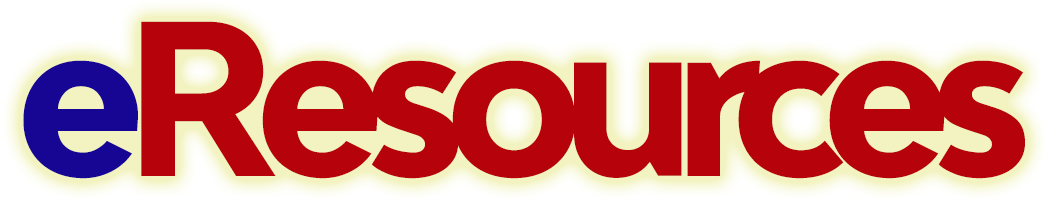
<style>
.page{position:relative;width:1056px;height:204px;background:#b6030b}
.page>*{position:absolute;margin:0}
.t1{font:208.3px "Adlinnaka-BoldDemo";letter-spacing:-0.1em;color:#b6030b}
.t2{font:208.3px "Adlinnaka-BoldDemo";letter-spacing:-0.1em;color:#170694}
</style>
<div class="page">
<p class="t1" style="left:23px;top:21px;width:1002px;height:158px"><span class="t2">e</span>Resources</p>
</div>
